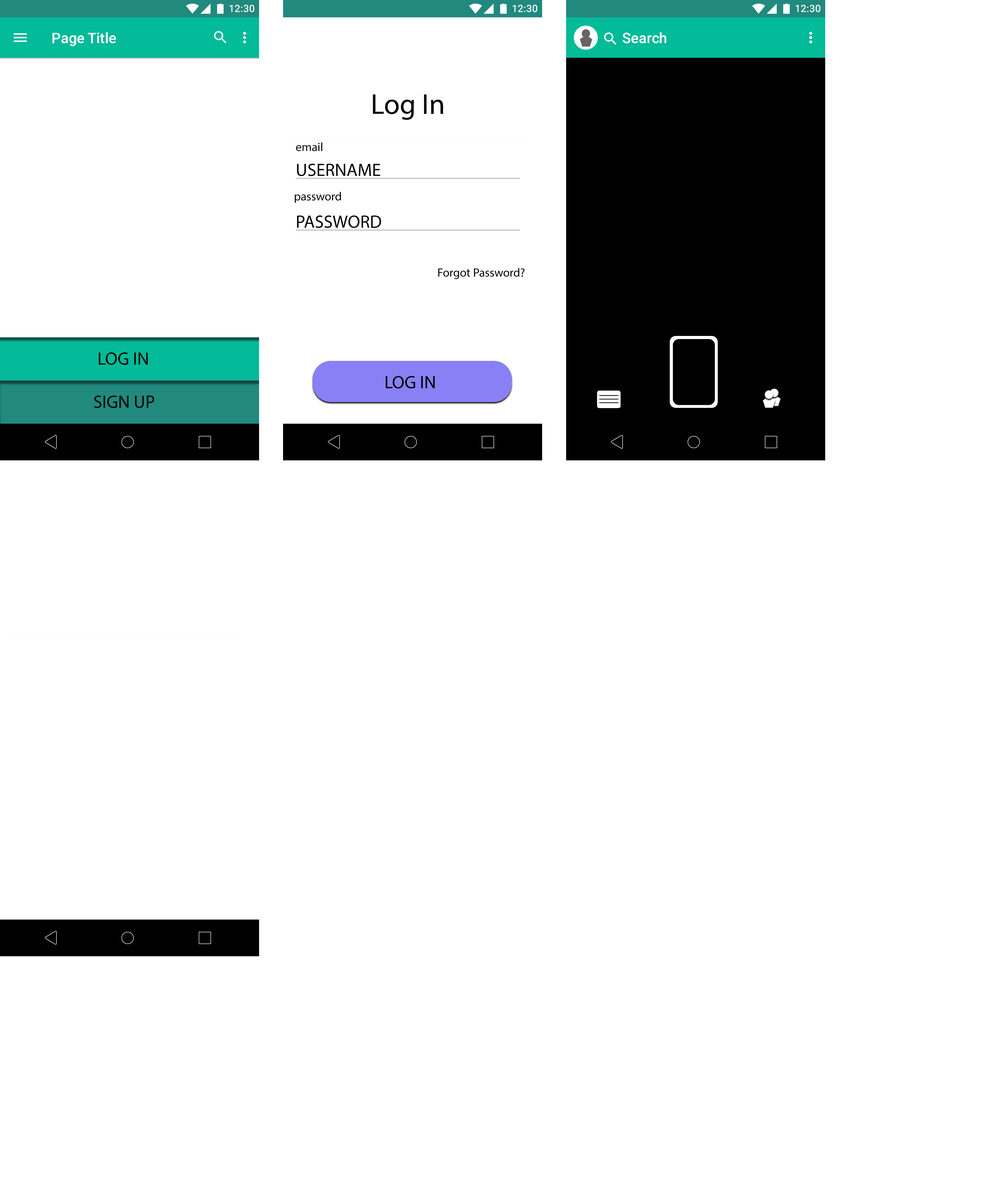
<style>
.page{position:relative;width:996px;height:1197px;background:#ffffff}
.page>*{position:absolute;margin:0}
.t1{font:10.1px "Roboto-Medium";color:#e9f3f2}
.t2{font:14.5px "Roboto-Medium";color:#ffffff}
.t3{font:28.8px "MyriadPro-Regular";color:#000000}
.t4{font:12px "MyriadPro-Regular";color:#000000}
.t5{font:18px "MyriadPro-Regular";color:#000000}
</style>
<div class="page">
<p class="t1" style="left:230px;top:5px;width:24px;height:7px">12:30</p>
<p class="t1" style="left:513px;top:5px;width:24px;height:7px">12:30</p>
<p class="t1" style="left:796px;top:5px;width:24px;height:7px">12:30</p>
<p class="t2" style="left:52px;top:32px;width:64px;height:14px">Page Title</p>
<p class="t2" style="left:622px;top:32px;width:44px;height:11px">Search</p>
<p class="t3" style="left:373px;top:94px;width:70px;height:26px">Log In</p>
<p class="t4" style="left:296px;top:142px;width:26px;height:9px">email</p>
<p class="t5" style="left:297px;top:164px;width:83px;height:12px">USERNAME</p>
<p class="t4" style="left:295px;top:192px;width:46px;height:11px">password</p>
<p class="t5" style="left:297px;top:215px;width:84px;height:13px">PASSWORD</p>
<p class="t4" style="left:438px;top:268px;width:87px;height:11px">Forgot Password?</p>
<p class="t5" style="left:99px;top:352px;width:49px;height:13px">LOG IN</p>
<p class="t5" style="left:386px;top:376px;width:49px;height:13px">LOG IN</p>
<p class="t5" style="left:94px;top:396px;width:60px;height:12px">SIGN UP</p>
</div>
